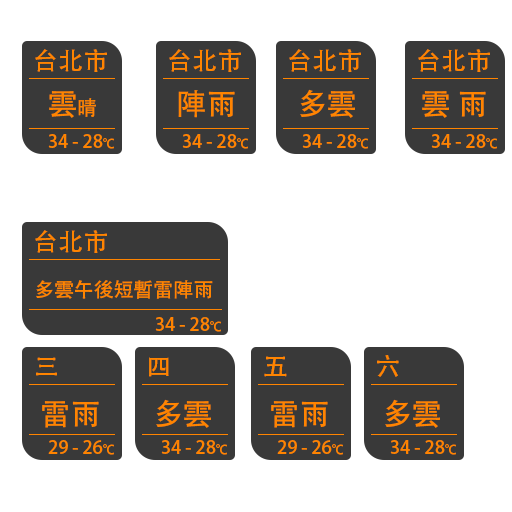
<style>
.page{position:relative;width:512px;height:512px;background:#ffffff}
.page>*{position:absolute;margin:0}
.t1{font:25px "AdobeHeitiStd-Regular";color:#ff8400}
.t2{font:30px "AdobeHeitiStd-Regular";color:#ff8400}
.t3{font:20px "AdobeHeitiStd-Regular";color:#ff8400}
.t4{font:18px "AdobeHeitiStd-Regular";color:#ff8400}
.t5{font:12px "AdobeHeitiStd-Regular";color:#ff8400}
</style>
<div class="page">
<p class="t1" style="left:35px;top:49px;width:72px;height:23px">台北市</p>
<p class="t1" style="left:169px;top:49px;width:72px;height:23px">台北市</p>
<p class="t1" style="left:289px;top:49px;width:72px;height:23px">台北市</p>
<p class="t1" style="left:418px;top:49px;width:72px;height:23px">台北市</p>
<p class="t2" style="left:300px;top:89px;width:55px;height:29px">多雲</p>
<p class="t2" style="left:49px;top:91px;width:47px;height:27px">雲<span class="t3">晴</span></p>
<p class="t2" style="left:178px;top:90px;width:57px;height:28px">陣雨</p>
<p class="t2" style="left:422px;top:91px;width:64px;height:27px">雲 雨</p>
<p class="t4" style="left:48px;top:134px;width:66px;height:15px">34 - 28<span class="t5">℃</span></p>
<p class="t4" style="left:182px;top:134px;width:66px;height:15px">34 - 28<span class="t5">℃</span></p>
<p class="t4" style="left:302px;top:134px;width:66px;height:15px">34 - 28<span class="t5">℃</span></p>
<p class="t4" style="left:431px;top:134px;width:66px;height:15px">34 - 28<span class="t5">℃</span></p>
<p class="t1" style="left:35px;top:230px;width:72px;height:23px">台北市</p>
<p class="t3" style="left:36px;top:280px;width:177px;height:19px">多雲午後短暫雷陣雨</p>
<p class="t4" style="left:155px;top:317px;width:66px;height:15px">34 - 28<span class="t5">℃</span></p>
<p class="t1" style="left:36px;top:357px;width:21px;height:19px">三</p>
<p class="t1" style="left:149px;top:357px;width:20px;height:20px">四</p>
<p class="t1" style="left:264px;top:356px;width:23px;height:21px">五</p>
<p class="t1" style="left:377px;top:355px;width:22px;height:22px">六</p>
<p class="t2" style="left:42px;top:401px;width:57px;height:27px">雷雨</p>
<p class="t2" style="left:156px;top:399px;width:55px;height:29px">多雲</p>
<p class="t2" style="left:271px;top:401px;width:57px;height:27px">雷雨</p>
<p class="t2" style="left:385px;top:399px;width:55px;height:29px">多雲</p>
<p class="t4" style="left:48px;top:440px;width:66px;height:15px">29 - 26<span class="t5">℃</span></p>
<p class="t4" style="left:161px;top:440px;width:66px;height:15px">34 - 28<span class="t5">℃</span></p>
<p class="t4" style="left:277px;top:440px;width:66px;height:15px">29 - 26<span class="t5">℃</span></p>
<p class="t4" style="left:390px;top:440px;width:66px;height:15px">34 - 28<span class="t5">℃</span></p>
</div>
